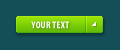
<style>
.page{position:relative;width:120px;height:50px;background:#144e56}
.page>*{position:absolute;margin:0}
.t1{font:10px "MyriadPro-BoldCond";color:#ffffff;text-transform:uppercase}
</style>
<div class="page">
<p class="t1" style="left:31px;top:21px;width:38px;height:8px">your text</p>
</div>
